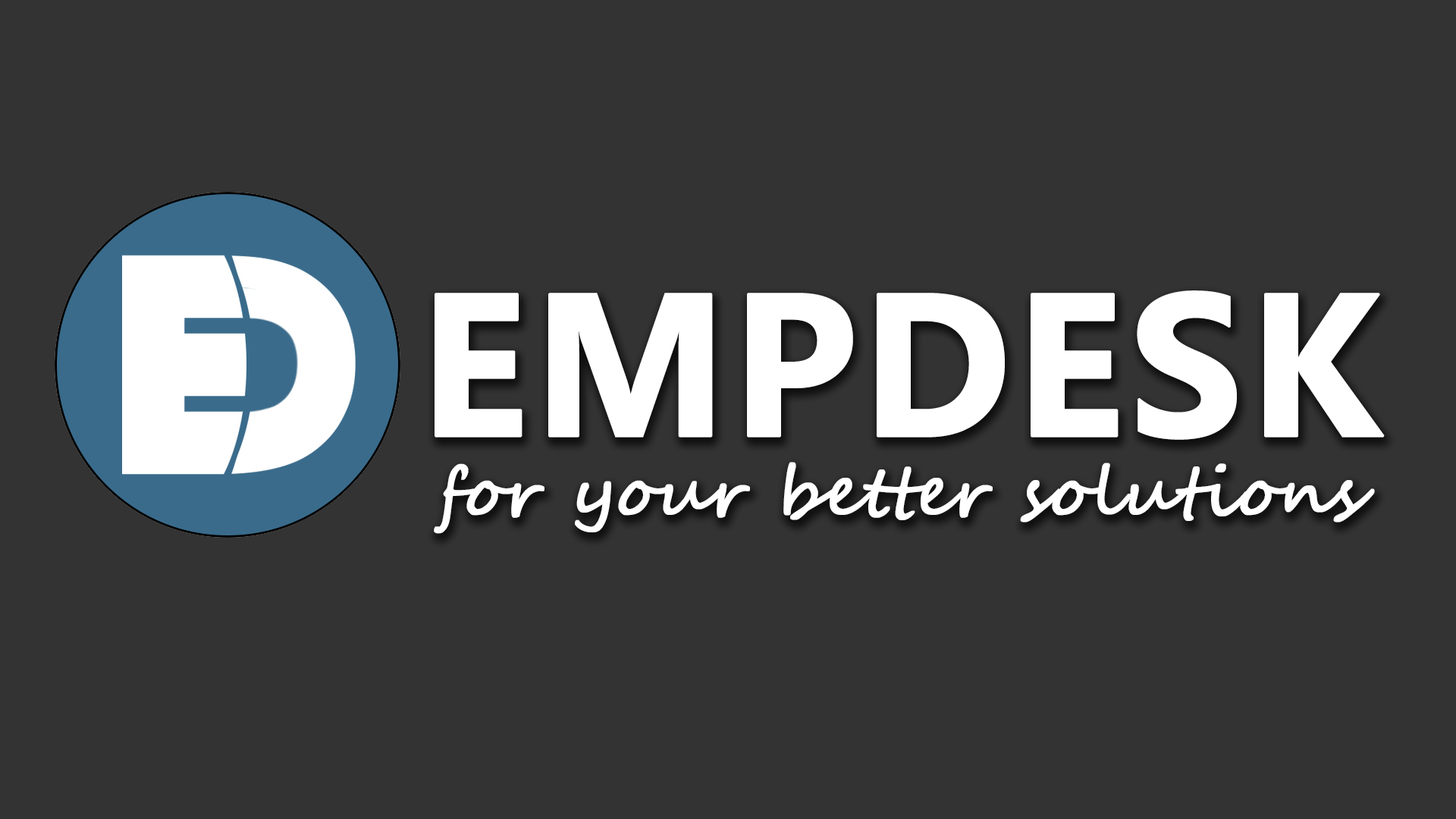
<style>
.page{position:relative;width:1456px;height:819px;background:#333333}
.page>*{position:absolute;margin:0}
.t1{font:202.9px "MicrosoftPhagsPa-Bold";color:#ffffff;font-weight:bold}
.t2{font:68.2px "SegoeScript";color:#ffffff;font-weight:bold}
</style>
<div class="page">
<p class="t1" style="left:435px;top:290px;width:950px;height:150px">EMPDESK</p>
<p class="t2" style="left:434px;top:462px;width:941px;height:72px">for your better solutions</p>
</div>
